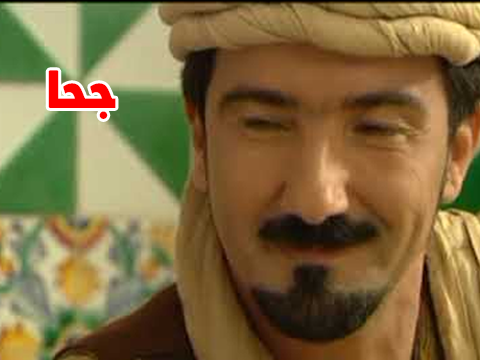
<style>
.page{position:relative;width:480px;height:360px}
.page>*{position:absolute;margin:0}
.t1{font:48px "AbdoMaster-Black";color:#ff0000}
</style>
<div class="page">
<p class="t1" style="left:48px;top:70px;width:68px;height:49px">جحا</p>
</div>
